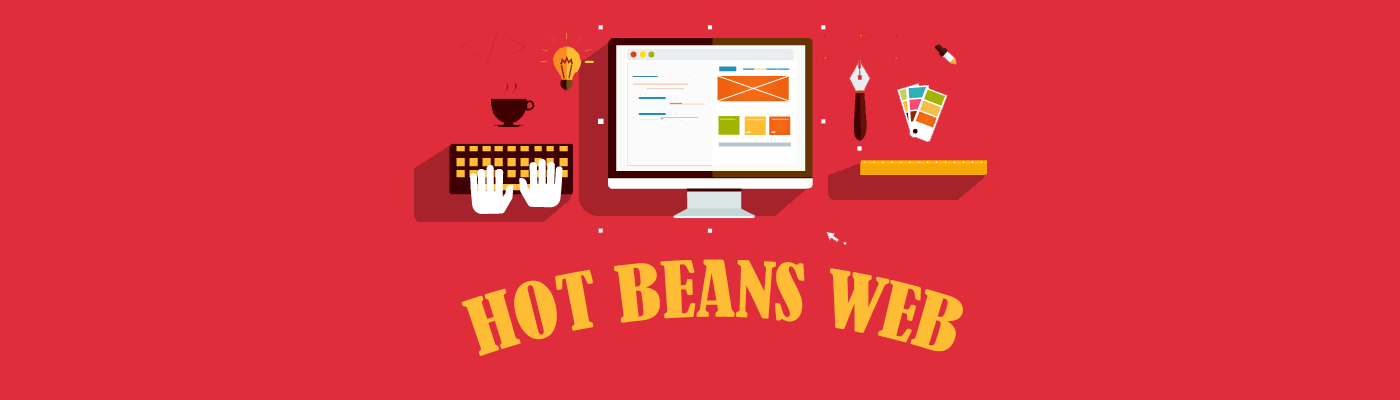
<style>
.page{position:relative;width:1400px;height:400px;background:#df2d3b}
.page>*{position:absolute;margin:0}
.t1{font:72px "BernardMT-Condensed";color:#ffbd35;text-transform:uppercase}
</style>
<div class="page">
<p class="t1" style="left:461px;top:259px;width:502px;height:97px">HOT Beans web</p>
</div>
